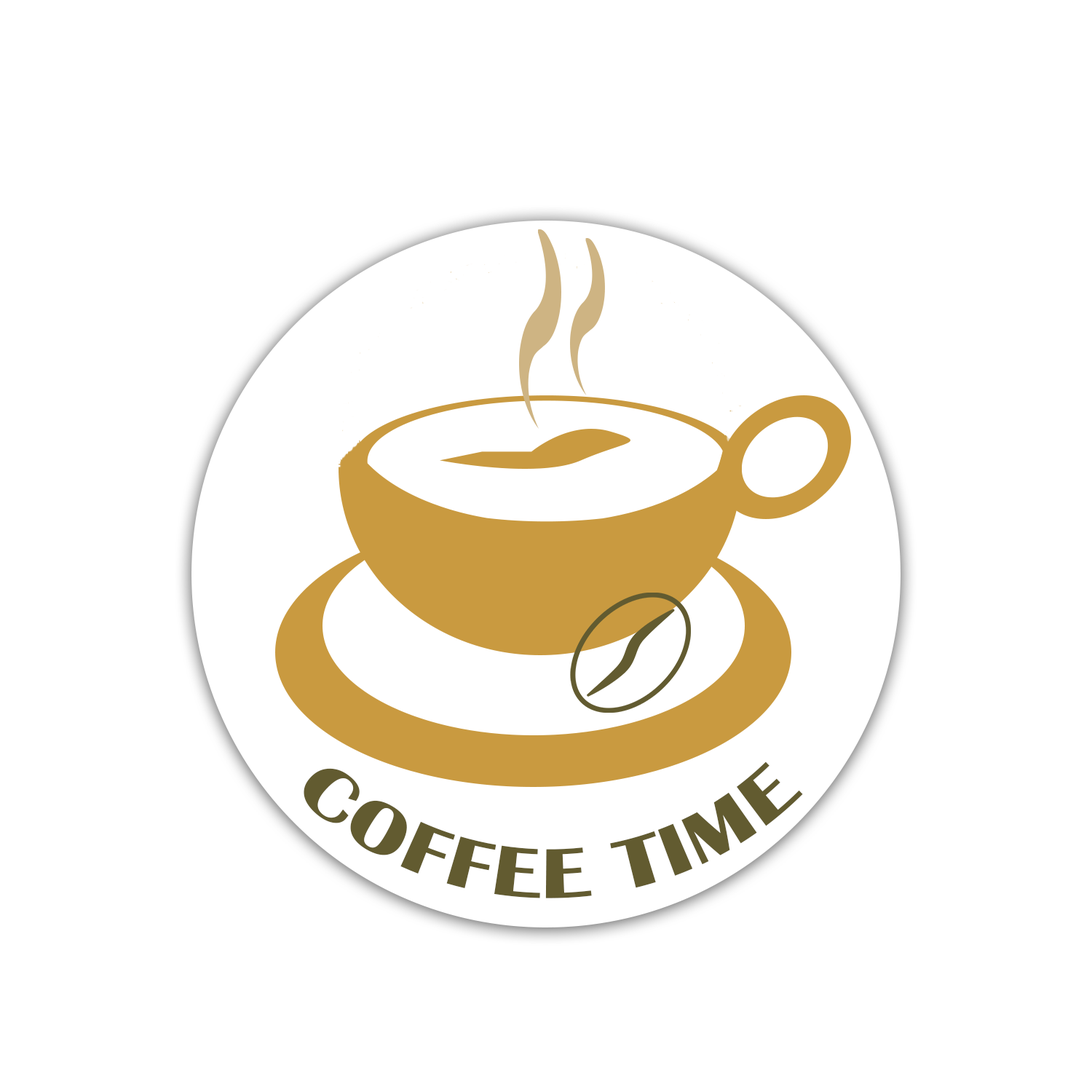
<style>
.page{position:relative;width:1092px;height:1092px;background:#ffffff}
.page>*{position:absolute;margin:0}
.t1{font:72.8px "BritannicBold";color:#625b30}
</style>
<div class="page">
<p class="t1" style="left:304px;top:761px;width:499px;height:137px">COFFEE TIME</p>
</div>
